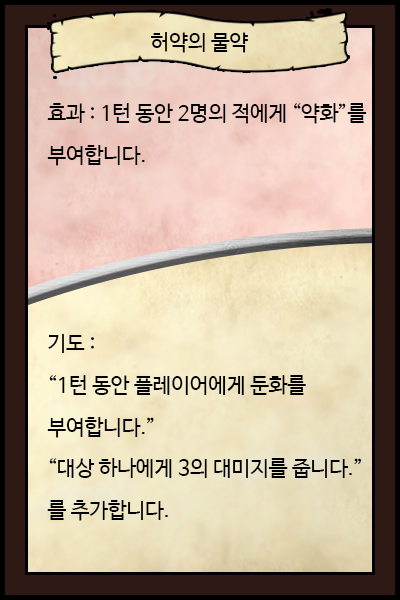
<style>
.page{position:relative;width:400px;height:600px}
.page>*{position:absolute;margin:0}
.t1{font:20.8px "NanumBarunGothic";color:#000000}
.t2{font:20.8px/41.7px "NanumBarunGothic";color:#000000}
</style>
<div class="page">
<p class="t1" style="left:150px;top:32px;width:98px;height:21px">허약의 물약</p>
<p class="t2" style="left:47px;top:103px;width:320px;height:63px">효과 : 1턴 동안 2명의 적에게 “약화”를<br>부여합니다.</p>
<p class="t2" style="left:47px;top:334px;width:315px;height:187px">기도 : <br>“1턴 동안 플레이어에게 둔화를<br>부여합니다.”<br>“대상 하나에게 3의 대미지를 줍니다.”<br>를 추가합니다.</p>
</div>
